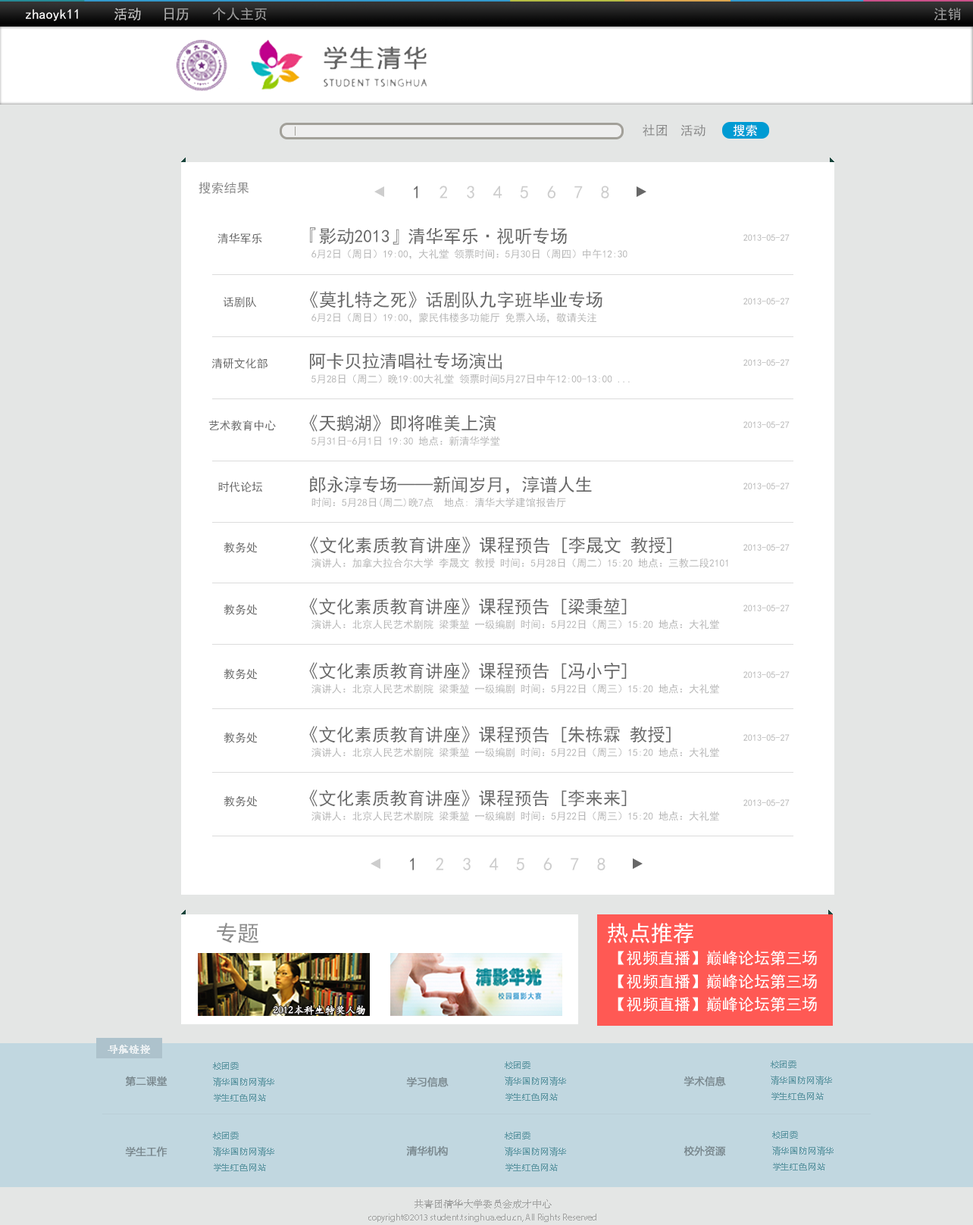
<style>
.page{position:relative;width:973px;height:1225px;background:#ffffff}
.page>*{position:absolute;margin:0}
.t1{font:13.8px "SimHei";color:#fffefe}
.t2{font:13.8px "SimHei";color:#c3c3c3}
.t3{font:13.8px "SimHei";color:#a9a9a9}
.t4{font:13.8px "SimHei";color:#9b9b9b}
.t5{font:12.7px "SimHei";color:#858585}
.t6{font:12.5px "SimHei";color:#ffffff}
.t7{font:18px "SimHei";color:#cdcdcd}
.t8{font:18px "SimHei";color:#676767}
.t9{font:11.3px "SimHei";color:#676767}
.t10{font:17.8px "SimHei";color:#676767}
.t11{font:9.2px "SimHei";color:#b6b6b6}
.t12{font:10.2px "SimHei";color:#b6b6b6}
.t13{font:21.9px "SimHei";color:#8d8d8d}
.t14{font:21.9px "SimHei";color:#ffffff}
.t15{font:15.9px "SimHei";color:#ffffff}
.t16{font:10.1px "STSong";color:#ffffff;font-weight:bold}
.t17{font:8.1px/16.2px "MicrosoftYaHei";letter-spacing:0.075em;color:#5f97a3}
.t18{font:10.1px "MicrosoftYaHei";color:#7a888e;font-weight:bold}
.t19{font:9.1px/14.1px "MyriadPro-Regular";color:#a2a3a2}
.t20{font:10.1px/14.1px "STSong";color:#a2a3a2}
</style>
<div class="page">
<p class="t1" style="left:26px;top:9px;width:52px;height:12px">zhaoyk11</p>
<p class="t2" style="left:114px;top:8px;width:27px;height:12px">活动</p>
<p class="t3" style="left:164px;top:8px;width:25px;height:12px">日历</p>
<p class="t4" style="left:212px;top:8px;width:55px;height:12px">个人主页</p>
<p class="t4" style="left:934px;top:8px;width:27px;height:12px">注销</p>
<p class="t5" style="left:643px;top:124px;width:24px;height:12px">社团</p>
<p class="t5" style="left:681px;top:124px;width:25px;height:12px">活动</p>
<p class="t6" style="left:733px;top:124px;width:24px;height:12px">搜索</p>
<p class="t5" style="left:199px;top:182px;width:50px;height:12px">搜索结果</p>
<p class="t7" style="left:414px;top:186px;width:195px;height:13px"><span class="t8">1  </span>2  3  4  5  6  7  8</p>
<p class="t9" style="left:218px;top:233px;width:44px;height:11px">清华军乐</p>
<p class="t10" style="left:310px;top:227px;width:257px;height:18px">『影动2013』清华军乐·视听专场</p>
<p class="t11" style="left:743px;top:234px;width:47px;height:7px">2013-05-27</p>
<p class="t12" style="left:311px;top:249px;width:316px;height:10px">6月2日（周日）19:00，大礼堂 领票时间：5月30日（周四）中午12:30</p>
<p class="t10" style="left:310px;top:291px;width:292px;height:17px">《莫扎特之死》话剧队九字班毕业专场</p>
<p class="t9" style="left:223px;top:296px;width:33px;height:12px">话剧队</p>
<p class="t11" style="left:743px;top:298px;width:47px;height:7px">2013-05-27</p>
<p class="t12" style="left:311px;top:313px;width:285px;height:10px">6月2日（周日）19:00，蒙民伟楼多功能厅 免票入场，敬请关注</p>
<p class="t10" style="left:310px;top:352px;width:192px;height:18px">阿卡贝拉清唱社专场演出</p>
<p class="t9" style="left:211px;top:358px;width:57px;height:11px">清研文化部</p>
<p class="t11" style="left:743px;top:359px;width:47px;height:7px">2013-05-27</p>
<p class="t12" style="left:311px;top:374px;width:319px;height:10px">5月28日（周二）晚19:00大礼堂 领票时间5月27日中午12:00-13:00 ...</p>
<p class="t9" style="left:208px;top:420px;width:68px;height:11px">艺术教育中心</p>
<p class="t10" style="left:309px;top:415px;width:187px;height:17px">《天鹅湖》即将唯美上演</p>
<p class="t11" style="left:743px;top:421px;width:47px;height:7px">2013-05-27</p>
<p class="t12" style="left:311px;top:437px;width:189px;height:9px">5月31日-6月1日 19:30 地点：新清华学堂</p>
<p class="t9" style="left:218px;top:481px;width:44px;height:12px">时代论坛</p>
<p class="t10" style="left:309px;top:476px;width:283px;height:18px">郎永淳专场——新闻岁月，淳谱人生</p>
<p class="t11" style="left:743px;top:483px;width:47px;height:7px">2013-05-27</p>
<p class="t12" style="left:311px;top:497px;width:255px;height:11px">时间：5月28日(周二)晚7点  地点: 清华大学建馆报告厅</p>
<p class="t9" style="left:224px;top:542px;width:33px;height:11px">教务处</p>
<p class="t10" style="left:310px;top:537px;width:361px;height:17px">《文化素质教育讲座》课程预告 [李晟文 教授]</p>
<p class="t11" style="left:743px;top:544px;width:47px;height:7px">2013-05-27</p>
<p class="t12" style="left:311px;top:558px;width:417px;height:10px">演讲人：加拿大拉合尔大学 李晟文 教授 时间：5月28日（周二）15:20 地点：三教二段2101</p>
<p class="t9" style="left:224px;top:604px;width:33px;height:11px">教务处</p>
<p class="t10" style="left:309px;top:598px;width:318px;height:17px">《文化素质教育讲座》课程预告 [梁秉堃]</p>
<p class="t11" style="left:743px;top:605px;width:47px;height:7px">2013-05-27</p>
<p class="t12" style="left:311px;top:619px;width:408px;height:11px">演讲人：北京人民艺术剧院 梁秉堃 一级编剧 时间：5月22日（周三）15:20 地点：大礼堂</p>
<p class="t10" style="left:309px;top:662px;width:318px;height:18px">《文化素质教育讲座》课程预告 [冯小宁]</p>
<p class="t9" style="left:224px;top:668px;width:33px;height:12px">教务处</p>
<p class="t11" style="left:743px;top:671px;width:47px;height:7px">2013-05-27</p>
<p class="t12" style="left:311px;top:684px;width:408px;height:10px">演讲人：北京人民艺术剧院 梁秉堃 一级编剧 时间：5月22日（周三）15:20 地点：大礼堂</p>
<p class="t9" style="left:224px;top:732px;width:33px;height:11px">教务处</p>
<p class="t10" style="left:309px;top:726px;width:362px;height:17px">《文化素质教育讲座》课程预告 [朱栋霖 教授]</p>
<p class="t11" style="left:743px;top:734px;width:47px;height:7px">2013-05-27</p>
<p class="t12" style="left:311px;top:747px;width:408px;height:11px">演讲人：北京人民艺术剧院 梁秉堃 一级编剧 时间：5月22日（周三）15:20 地点：大礼堂</p>
<p class="t9" style="left:224px;top:796px;width:33px;height:11px">教务处</p>
<p class="t10" style="left:309px;top:790px;width:318px;height:17px">《文化素质教育讲座》课程预告 [李来来]</p>
<p class="t11" style="left:743px;top:800px;width:47px;height:6px">2013-05-27</p>
<p class="t12" style="left:311px;top:811px;width:408px;height:11px">演讲人：北京人民艺术剧院 梁秉堃 一级编剧 时间：5月22日（周三）15:20 地点：大礼堂</p>
<p class="t7" style="left:410px;top:858px;width:196px;height:13px"><span class="t8">1  </span>2  3  4  5  6  7  8</p>
<p class="t13" style="left:217px;top:923px;width:41px;height:21px">专题</p>
<p class="t14" style="left:608px;top:923px;width:85px;height:21px">热点推荐</p>
<p class="t15" style="left:618px;top:950px;width:199px;height:16px">【视频直播】巅峰论坛第三场</p>
<p class="t15" style="left:618px;top:974px;width:199px;height:16px">【视频直播】巅峰论坛第三场</p>
<p class="t15" style="left:618px;top:997px;width:199px;height:15px">【视频直播】巅峰论坛第三场</p>
<p class="t16" style="left:108px;top:1045px;width:42px;height:9px;opacity:0.7">导航链接</p>
<p class="t17" style="left:505px;top:1062px;width:61px;height:39px">校团委<br>清华国防网清华<br>学生红色网站</p>
<p class="t17" style="left:771px;top:1061px;width:61px;height:39px">校团委<br>清华国防网清华<br>学生红色网站</p>
<p class="t17" style="left:213px;top:1062px;width:61px;height:40px">校团委<br>清华国防网清华<br>学生红色网站</p>
<p class="t18" style="left:125px;top:1076px;width:42px;height:11px">第二课堂</p>
<p class="t18" style="left:406px;top:1077px;width:43px;height:11px">学习信息</p>
<p class="t18" style="left:684px;top:1076px;width:42px;height:11px">学术信息</p>
<p class="t17" style="left:213px;top:1132px;width:61px;height:40px">校团委<br>清华国防网清华<br>学生红色网站</p>
<p class="t17" style="left:505px;top:1132px;width:61px;height:40px">校团委<br>清华国防网清华<br>学生红色网站</p>
<p class="t17" style="left:772px;top:1131px;width:62px;height:40px">校团委<br>清华国防网清华<br>学生红色网站</p>
<p class="t18" style="left:406px;top:1146px;width:42px;height:10px">清华机构</p>
<p class="t18" style="left:684px;top:1146px;width:42px;height:10px">校外资源</p>
<p class="t18" style="left:125px;top:1147px;width:42px;height:10px">学生工作</p>
<p class="t19" style="left:368px;top:1200px;width:228px;height:23px;text-align:center"><span class="t20">共青团清华大学委员会成才中心<br></span>copyright©2013 student.tsinghua.edu.cn, All Rights Reserved</p>
</div>
